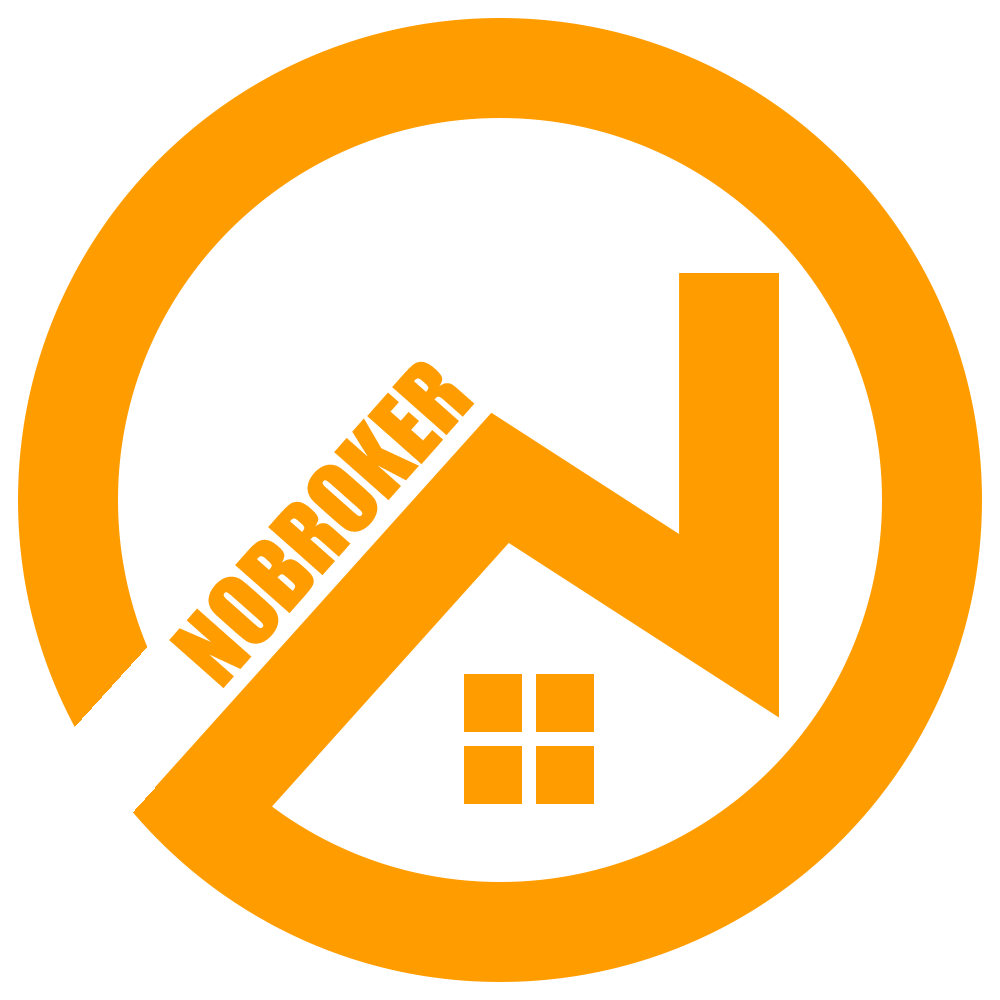
<style>
.page{position:relative;width:1000px;height:1000px;background:#ffffff}
.page>*{position:absolute;margin:0}
.t1{font:91.7px "Impact";color:#ff9d00}
</style>
<div class="page">
<p class="t1" style="left:169px;top:361px;width:306px;height:327px;rotate:-48deg">NOBROKER</p>
</div>
